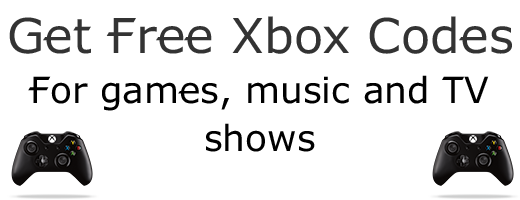
<style>
.page{position:relative;width:520px;height:200px;background:#ffffff}
.page>*{position:absolute;margin:0}
.t1{font:48px "XBOX360";color:#333333}
.t2{font:48px "XBOX360";color:#000000}
.t3{font:36px/48px "XBOX360";color:#000000}
</style>
<div class="page">
<p class="t1" style="left:9px;top:16px;width:503px;height:38px">Get Free Xbox Codes <span class="t2">Gift</span></p>
<p class="t3" style="left:28px;top:75px;width:461px;height:77px;text-align:center">For games, music and TV shows</p>
</div>
